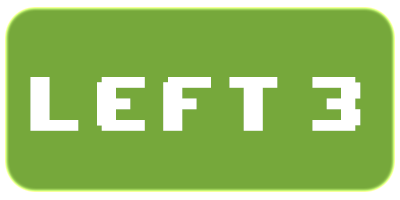
<style>
.page{position:relative;width:400px;height:200px;background:#76a83b}
.page>*{position:absolute;margin:0}
.t1{font:64.3px "8BITWONDERNominal";letter-spacing:0.16em;color:#ffffff;scale:0.89 1}
</style>
<div class="page">
<p class="t1" style="left:30px;top:77px;width:331px;height:54px">left 3</p>
</div>
